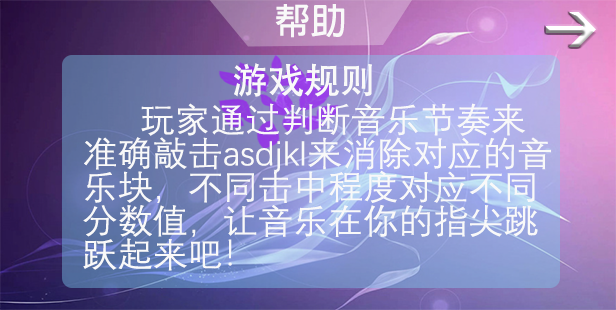
<style>
.page{position:relative;width:616px;height:310px}
.page>*{position:absolute;margin:0}
.t1{font:36px "AdobeFanHeitiStd-Bold";color:#f9f9f9}
.t2{font:36px "AdobeHeitiStd-Regular";color:#f9f9f9}
.t3{font:33.7px/33.7px "DengXian";color:#f9f9f9;scale:1.04 1}
</style>
<div class="page">
<p class="t1" style="left:275px;top:4px;width:70px;height:34px">帮助</p>
<p class="t2" style="left:234px;top:63px;width:138px;height:34px">游戏规则</p>
<p class="t3" style="left:83px;top:103px;width:468px;height:168px">玩家通过判断音乐节奏来准确敲击asdjkl来消除对应的音乐块，不同击中程度对应不同分数值，让音乐在你的指尖跳跃起来吧！</p>
</div>
